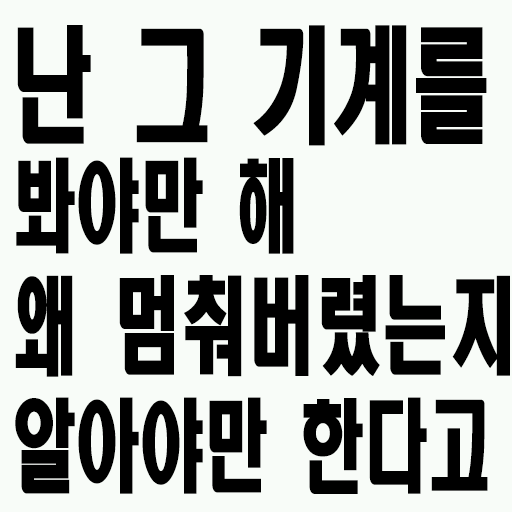
<style>
.page{position:relative;width:512px;height:512px;background:#f8fcf8}
.page>*{position:absolute;margin:0}
.t1{font:105px/120px "HeadlineR-HM";color:#000000;scale:0.64 1}
.t2{font:125px/120px "HeadlineR-HM";color:#000000;scale:0.64 1}
.t3{font:100px/120px "HeadlineR-HM";color:#000000;scale:0.64 1}
</style>
<div class="page">
<p class="t1" style="left:15px;top:25px;width:495px;height:469px"><span class="t2">난 그 기계를<br></span><span class="t3">봐야만 해<br></span>왜 멈춰버렸는지<br><span class="t3">알아야만 한다고</span></p>
</div>
